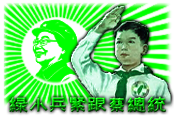
<style>
.page{position:relative;width:174px;height:140px;background:#ffffff}
.page>*{position:absolute;margin:0}
.t1{font:19.7px "FZZJ-MSHLFW"}
</style>
<div class="page">
<p class="t1" style="left:9px;top:96px;width:157px;height:17px">绿小兵紧跟蔡总统</p>
</div>
